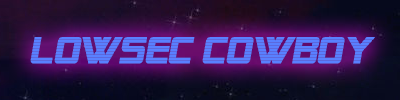
<style>
.page{position:relative;width:400px;height:100px}
.page>*{position:absolute;margin:0}
.t1{font:37px "AlienEncounters";color:#5980ff;font-weight:bold;font-style:italic}
</style>
<div class="page">
<p class="t1" style="left:30px;top:37px;width:345px;height:27px">Lowsec Cowboy</p>
</div>
